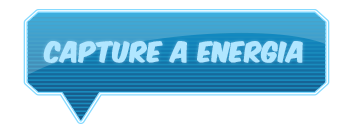
<style>
.page{position:relative;width:350px;height:140px;background:#ffffff}
.page>*{position:absolute;margin:0}
.t1{font:24px "KomikaAxis";color:#b0e6ff;font-weight:bold}
</style>
<div class="page">
<p class="t1" style="left:43px;top:41px;width:260px;height:22px">CAPTURE A ENERGIA</p>
</div>
